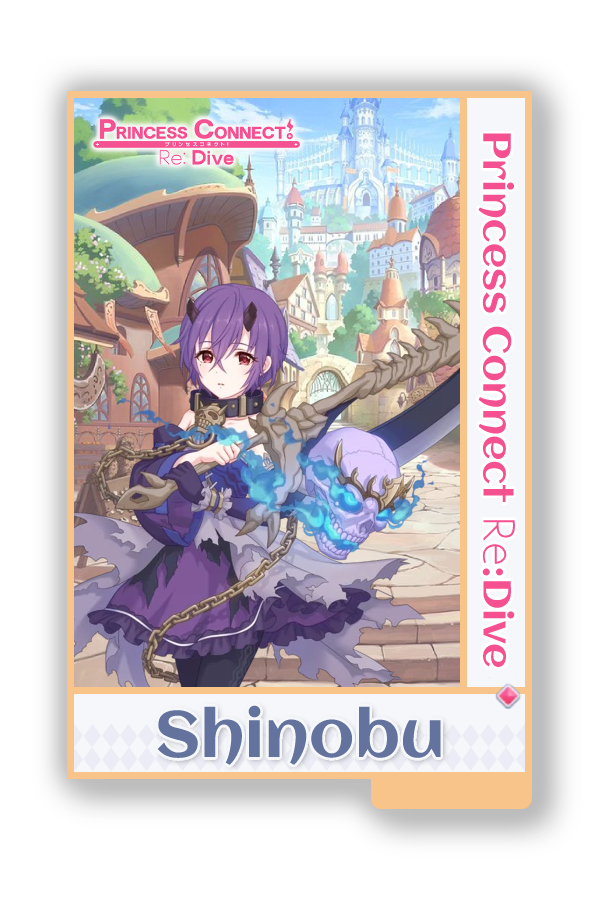
<style>
.page{position:relative;width:600px;height:900px;background:#ffffff}
.page>*{position:absolute;margin:0}
.t1{font:39px "Aclonica-Regular";color:#f55191}
.t2{font:39px "AaarghNormal";color:#f55191}
.t3{font:65px "Aclonica-Regular";color:#64739d}
</style>
<div class="page">
<p class="t1" style="left:478px;top:133px;width:38px;height:534px;rotate:90deg">Princess Connect <span class="t2">Re</span>:Dive</p>
<p class="t3" style="left:157px;top:705px;width:284px;height:60px">Shinobu</p>
</div>
